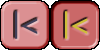
<style>
.page{position:relative;width:100px;height:50px;background:#db9092}
.page>*{position:absolute;margin:0}
.t1{font:30px "LucidaSans";color:#414058}
.t2{font:30px "LucidaSans";color:#cebe38}
</style>
<div class="page">
<p class="t1" style="left:15px;top:11px;width:23px;height:28px">|&lt;</p>
<p class="t2" style="left:65px;top:11px;width:23px;height:28px">|&lt;</p>
</div>
